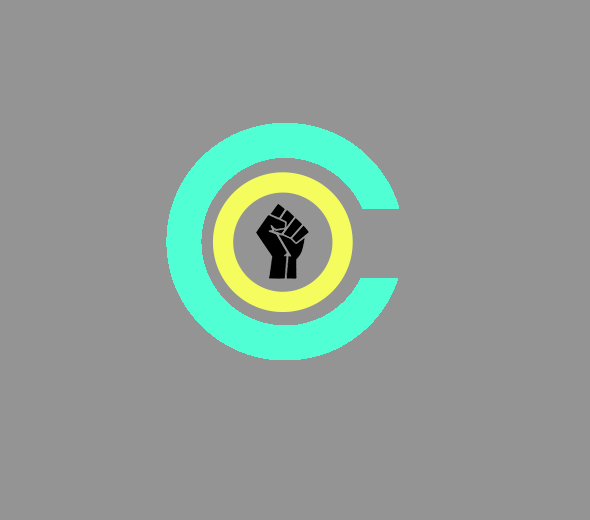
<style>
.page{position:relative;width:590px;height:520px;background:#949494}
.page>*{position:absolute;margin:0}
.t1{font:210px "AquireRegular";color:#f4fd5d}
</style>
<div class="page">
<p class="t1" style="left:212px;top:172px;width:141px;height:140px">o</p>
</div>
